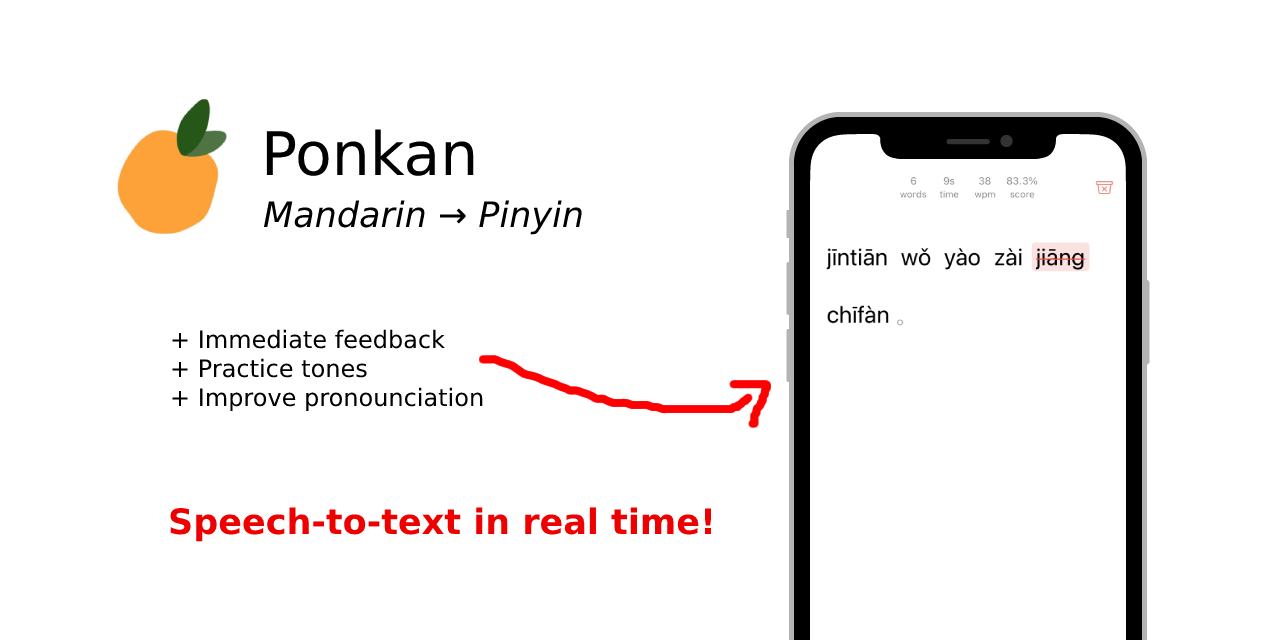
<style>
.page{position:relative;width:1280px;height:640px;background:#ffffff}
.page>*{position:absolute;margin:0}
.t1{font:60px "DejaVuSans";color:#000000}
.t2{font:35px "DejaVuSans-Oblique";color:#000000}
.t3{font:24px "DejaVuSans";color:#000000}
.t4{font:35px "DejaVuSans-Bold";color:#ef0000}
</style>
<div class="page">
<p class="t1" style="left:266px;top:129px;width:208px;height:47px">Ponkan</p>
<p class="t2" style="left:263px;top:200px;width:319px;height:35px">Mandarin → Pinyin</p>
<p class="t3" style="left:172px;top:329px;width:311px;height:82px">+ Immediate feedback<br>+ Practice tones <br>+ Improve pronounciation</p>
<p class="t4" style="left:170px;top:507px;width:542px;height:35px">Speech-to-text in real time!</p>
</div>
